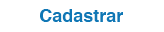
<style>
.page{position:relative;width:164px;height:32px;background:#ffffff}
.page>*{position:absolute;margin:0}
.t1{font:18px "Helvetica-Bold";color:#1077b5}
</style>
<div class="page">
<p class="t1" style="left:40px;top:9px;width:83px;height:13px">Cadastrar</p>
</div>
